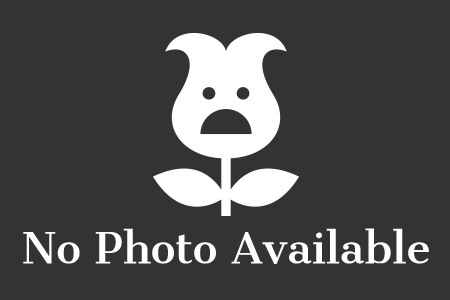
<style>
.page{position:relative;width:450px;height:300px;background:#333333}
.page>*{position:absolute;margin:0}
.t1{font:42px "CantataOne-Regular";color:#ffffff}
</style>
<div class="page">
<p class="t1" style="left:23px;top:228px;width:406px;height:36px">No Photo Available</p>
</div>
